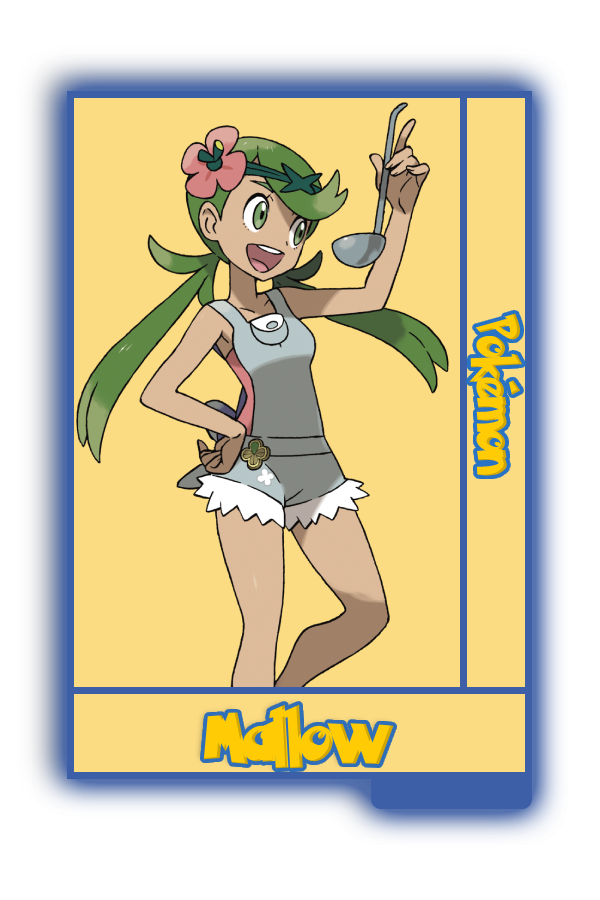
<style>
.page{position:relative;width:600px;height:900px;background:#fbdc83}
.page>*{position:absolute;margin:0}
.t1{font:48.8px "PokemonSolidNormal";color:#ffcb05;scale:0.8 1}
.t2{font:60.1px "PokemonSolidNormal";color:#ffcb05;scale:0.96 1}
</style>
<div class="page">
<p class="t1" style="left:469px;top:313px;width:54px;height:163px;rotate:90deg">Pokémon</p>
<p class="t2" style="left:203px;top:704px;width:191px;height:65px">Mallow</p>
</div>
